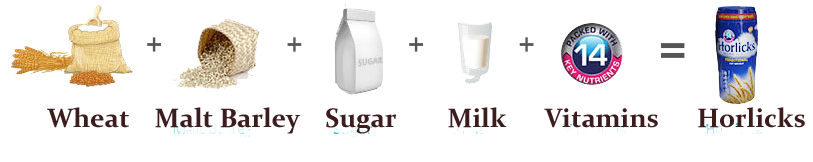
<style>
.page{position:relative;width:813px;height:162px;background:#ffffff}
.page>*{position:absolute;margin:0}
.t1{font:26.7px "Constantia-Bold";color:#3b1d1d}
</style>
<div class="page">
<p class="t1" style="left:47px;top:107px;width:758px;height:27px">Wheat    Malt Barley    Sugar        Milk      Vitamins      Horlicks</p>
</div>
